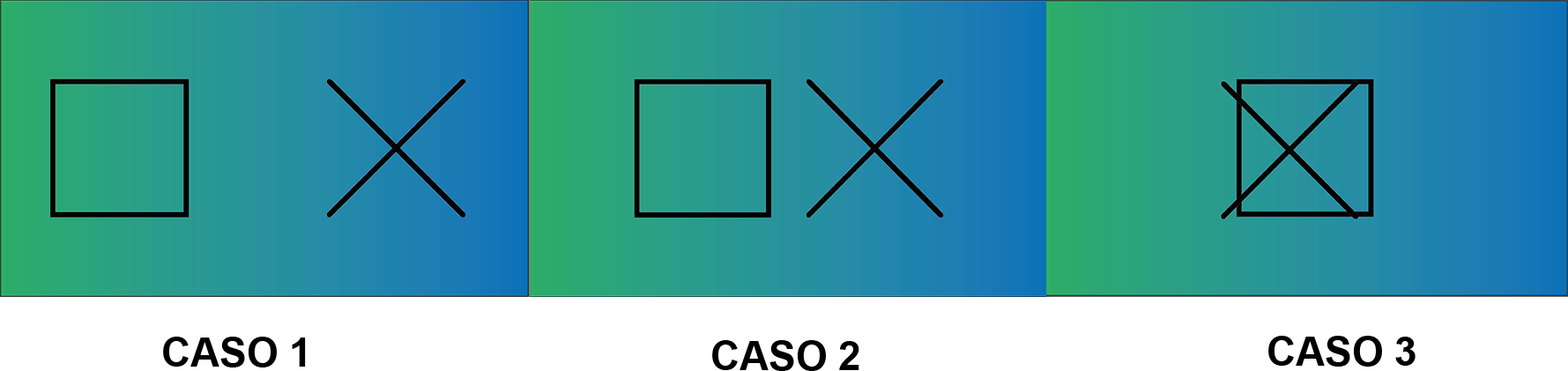
<style>
.page{position:relative;width:1568px;height:371px}
.page>*{position:absolute;margin:0}
.t1{font:40.4px "Arial-BoldMT";color:#000000}
</style>
<div class="page">
<p class="t1" style="left:163px;top:337px;width:143px;height:31px">CASO 1</p>
<p class="t1" style="left:712px;top:340px;width:147px;height:31px">CASO 2</p>
<p class="t1" style="left:1268px;top:336px;width:148px;height:31px">CASO 3</p>
</div>
